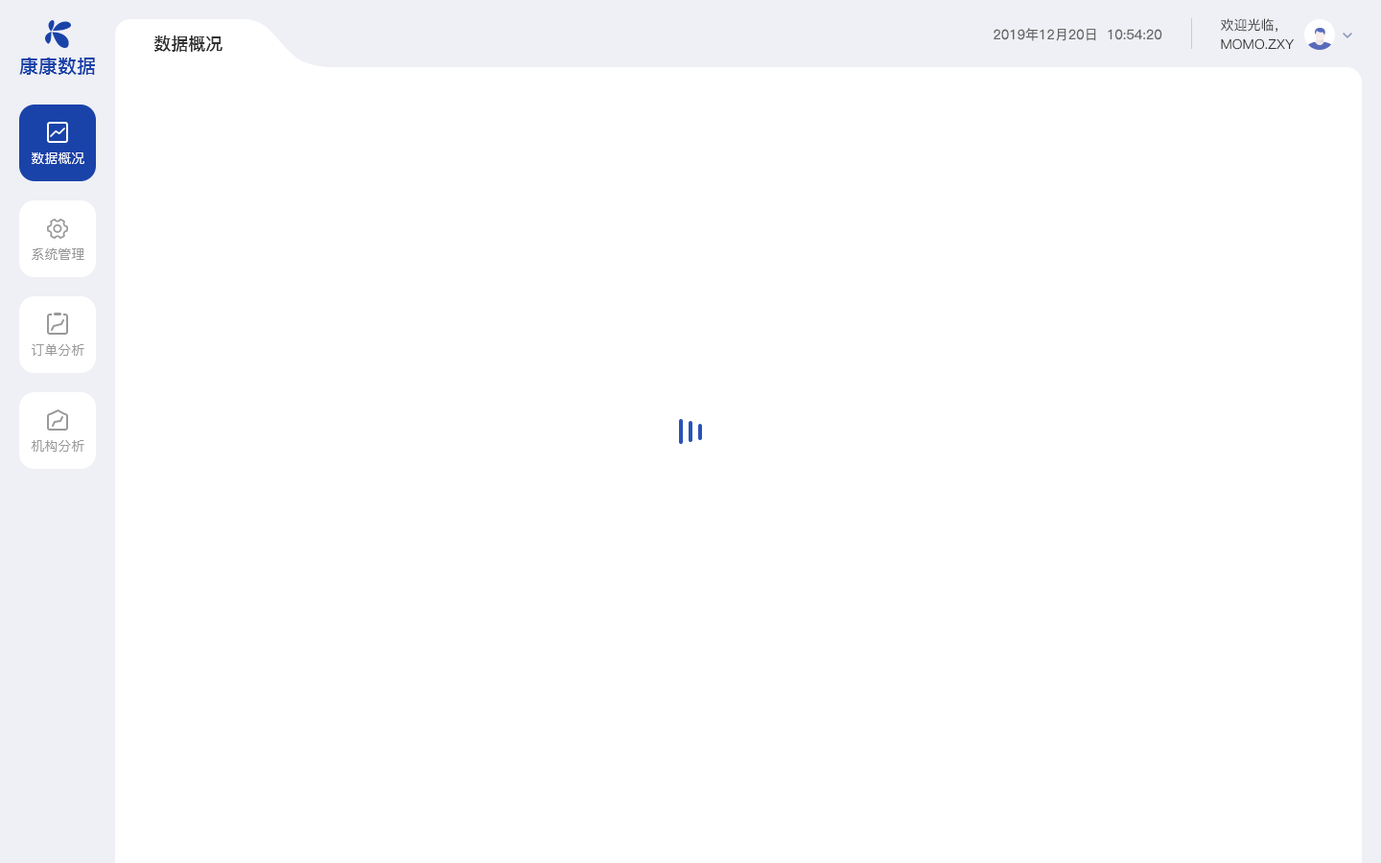
<style>
.page{position:relative;width:1381px;height:863px;background:#ffffff}
.page>*{position:absolute;margin:0}
.t1{font:13.4px "PingFang-SC-Regular";color:#666666}
.t2{font:13.4px "PingFang-SC-Medium";color:#333333;text-transform:uppercase}
.t3{font:17.3px "PingFang-SC-Bold";color:#333333;text-transform:uppercase}
.t4{font:19.2px "PingFangSC-Medium";color:#1a43a9;text-transform:uppercase}
.t5{font:13.4px "PingFang-SC-Medium";color:#ffffff;text-transform:uppercase}
.t6{font:13.4px "PingFang-SC-Medium";color:#999999;text-transform:uppercase}
</style>
<div class="page">
<p class="t1" style="left:994px;top:28px;width:169px;height:13px">2019年12月20日  10:54:20</p>
<p class="t2" style="left:1221px;top:18px;width:57px;height:15px">欢迎光临，</p>
<p class="t3" style="left:154px;top:35px;width:69px;height:17px">数据概况</p>
<p class="t2" style="left:1221px;top:38px;width:73px;height:12px">momo.zxy</p>
<p class="t4" style="left:19px;top:57px;width:76px;height:18px">康康数据</p>
<p class="t5" style="left:32px;top:153px;width:52px;height:11px">数据概况</p>
<p class="t6" style="left:32px;top:247px;width:52px;height:13px">系统管理</p>
<p class="t6" style="left:32px;top:343px;width:52px;height:13px">订单分析</p>
<p class="t6" style="left:31px;top:440px;width:53px;height:12px">机构分析</p>
</div>
